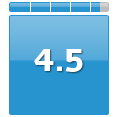
<style>
.page{position:relative;width:117px;height:117px;background:#2793cf}
.page>*{position:absolute;margin:0}
.t1{font:36px "Colaborate-Bold";color:#ffffff;text-transform:uppercase}
</style>
<div class="page">
<p class="t1" style="left:34px;top:49px;width:49px;height:23px">4.5</p>
</div>
